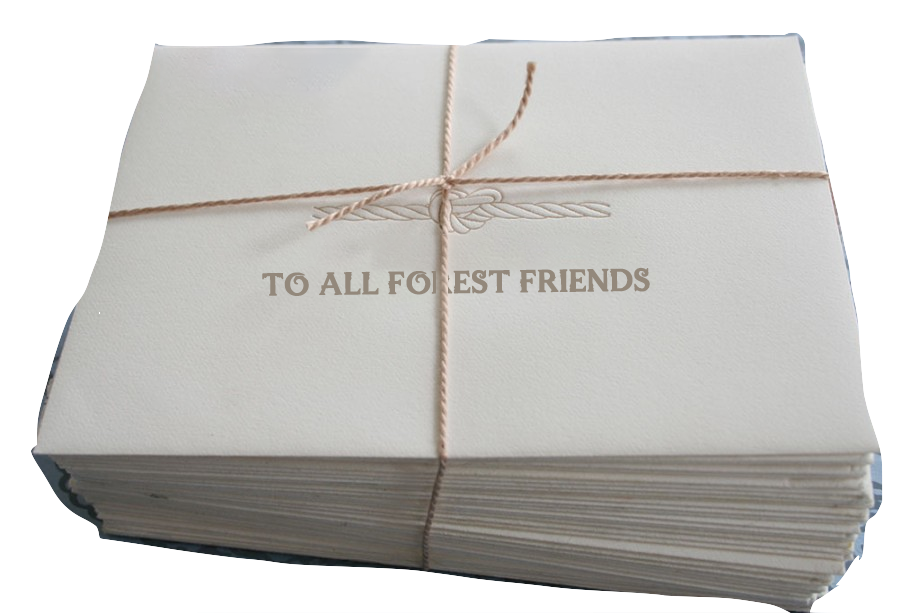
<style>
.page{position:relative;width:920px;height:613px;background:#ffffff}
.page>*{position:absolute;margin:0}
.t1{font:34px "WizardWorld-Simplified";color:#93887b;font-weight:bold}
</style>
<div class="page">
<p class="t1" style="left:262px;top:267px;width:388px;height:29px;rotate:-1deg">to all forest friends</p>
</div>
